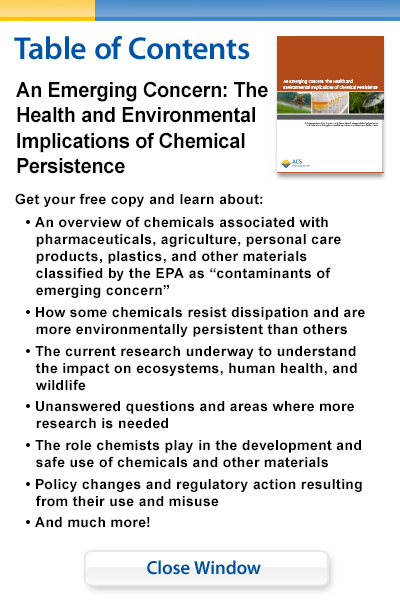
<style>
.page{position:relative;width:400px;height:600px;background:#ffffff}
.page>*{position:absolute;margin:0}
.t1{font:21px "Arial-BoldMT";letter-spacing:-0.01em;color:#000000;scale:0.95 1}
.t2{font:14px "Arial-BoldMT";letter-spacing:0.025em;color:#000000}
.t3{font:14px/17px "Arial-BoldMT";letter-spacing:0.025em;color:#000000}
</style>
<div class="page">
<p class="t1" style="left:16px;top:81px;width:252px;height:93px">An Emerging Concern: The Health and Environmental Implications of Chemical Persistence</p>
<p class="t2" style="left:15px;top:193px;width:248px;height:14px">Get your free copy and learn about:</p>
<p class="t3" style="left:26px;top:216px;width:339px;height:312px">• An overview of chemicals associated with pharmaceuticals, agriculture, personal care products, plastics, and other materials classified by the EPA as “contaminants of emerging concern”<br>• How some chemicals resist dissipation and are more environmentally persistent than others<br>• The current research underway to understand the impact on ecosystems, human health, and wildlife<br>• Unanswered questions and areas where more research is needed<br>• The role chemists play in the development and safe use of chemicals and other materials<br>• Policy changes and regulatory action resulting from their use and misuse<br>• And much more!</p>
</div>
